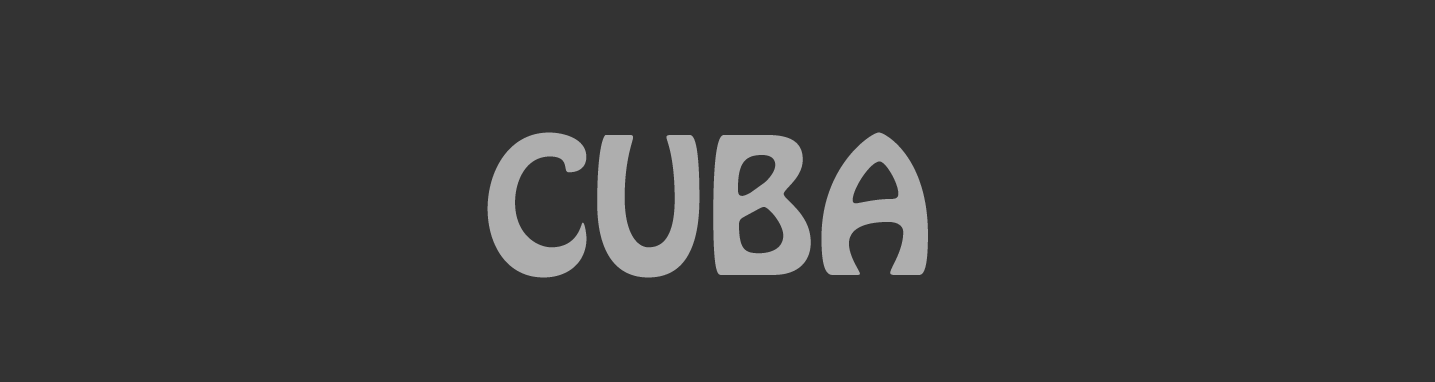
<style>
.page{position:relative;width:1435px;height:382px;background:#333333}
.page>*{position:absolute;margin:0}
.t1{font:168px "HoboStd";color:#aeaeae}
</style>
<div class="page">
<p class="t1" style="left:487px;top:132px;width:441px;height:146px">CUBA</p>
</div>
